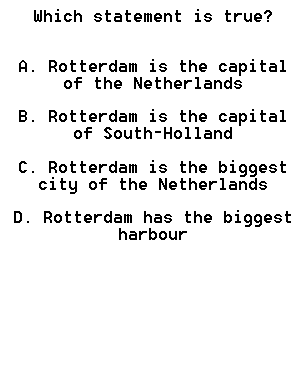
<style>
.page{position:relative;width:305px;height:380px;background:#ffffff}
.page>*{position:absolute;margin:0}
.t1{font:14px "8514oem";color:#000000}
</style>
<div class="page">
<p class="t1" style="left:14px;top:9px;width:277px;height:231px;text-align:center">Which statement is true? <br><br><br>A. Rotterdam is the capital of the Netherlands<br> <br>B. Rotterdam is the capital of South-Holland <br><br>C. Rotterdam is the biggest city of the Netherlands<br> <br>D. Rotterdam has the biggest harbour</p>
</div>
